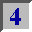
<style>
.page{position:relative;width:32px;height:32px;background:#bbbbbb}
.page>*{position:absolute;margin:0}
.t1{font:25px "TimesNewRomanPS-BoldMT";color:#04009b}
</style>
<div class="page">
<p class="t1" style="left:10px;top:8px;width:11px;height:17px">4</p>
</div>
